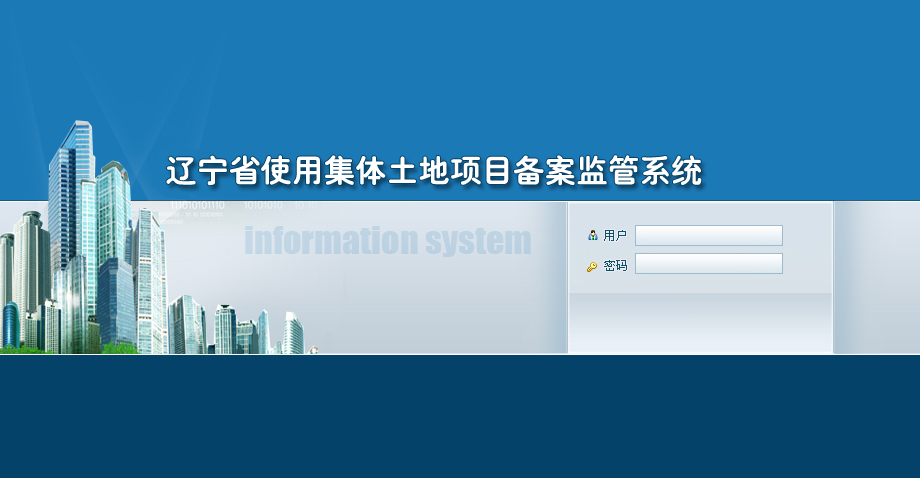
<style>
.page{position:relative;width:920px;height:478px;background:#1b79b6}
.page>*{position:absolute;margin:0}
.t1{font:28.7px "¾­µä´ÖÔ²¼ò-regular";color:#ffffff}
</style>
<div class="page">
<p class="t1" style="left:166px;top:155px;width:536px;height:31px">辽宁省使用集体土地项目备案监管系统</p>
</div>
